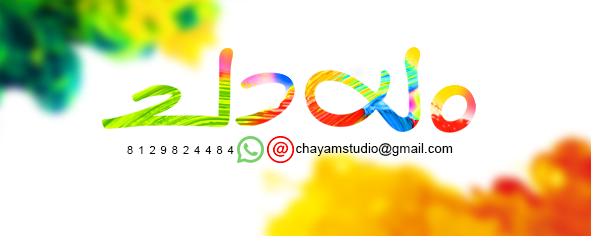
<style>
.page{position:relative;width:591px;height:236px;background:#ffffff}
.page>*{position:absolute;margin:0}
.t1{font:11px "ArialMT";letter-spacing:0.5em;color:#070705;text-transform:uppercase;scale:0.96 1}
.t2{font:13.4px "ArialMT";color:#070705}
</style>
<div class="page">
<p class="t1" style="left:127px;top:146px;width:107px;height:8px">8129824484</p>
<p class="t2" style="left:296px;top:143px;width:157px;height:13px">chayamstudio@gmail.com</p>
</div>
